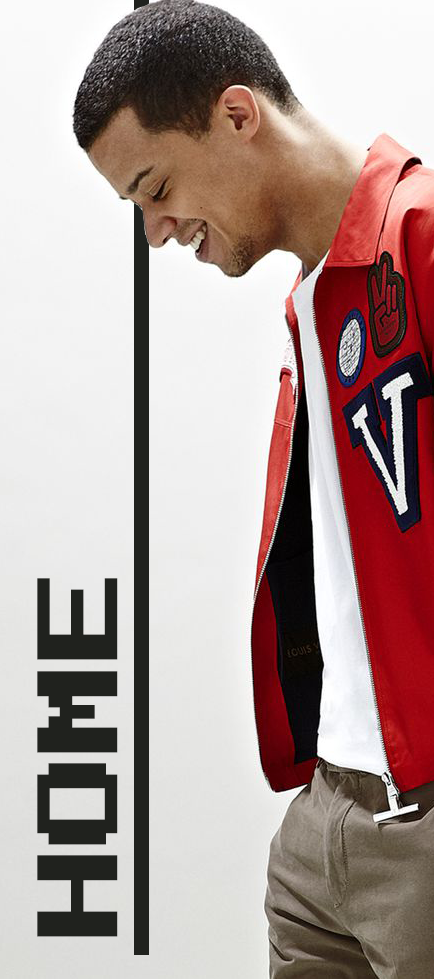
<style>
.page{position:relative;width:434px;height:979px}
.page>*{position:absolute;margin:0}
.t1{font:90px "PressStart2P-Regular";color:#20221e;font-weight:bold}
</style>
<div class="page">
<p class="t1" style="left:37px;top:578px;width:81px;height:359px;rotate:-90deg">HOME</p>
</div>
